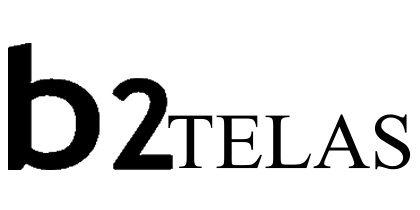
<style>
.page{position:relative;width:420px;height:210px;background:#ffffff}
.page>*{position:absolute;margin:0}
.t1{font:117.6px "MicrosoftHimalaya";color:#000000}
</style>
<div class="page">
<p class="t1" style="left:168px;top:114px;width:243px;height:56px">TELAS</p>
</div>
